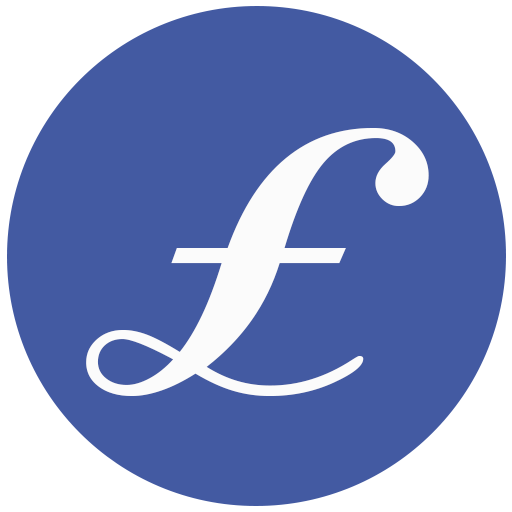
<style>
.page{position:relative;width:512px;height:512px;background:#435aa2}
.page>*{position:absolute;margin:0}
.t1{font:584.3px "CommercialScriptBT-Regular";color:#fbfbfb}
</style>
<div class="page">
<p class="t1" style="left:86px;top:128px;width:343px;height:268px">£</p>
</div>
